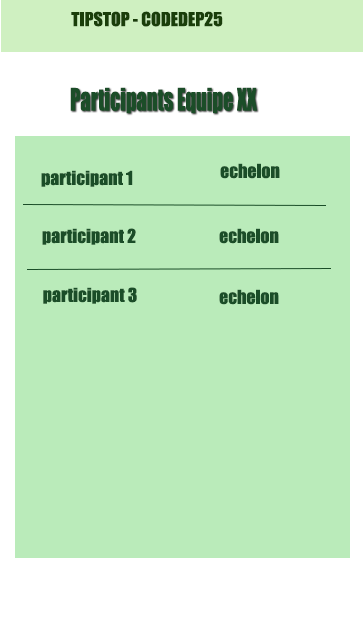
<style>
.page{position:relative;width:363px;height:643px;background:#baebba}
.page>*{position:absolute;margin:0}
.t1{font:17.8px "Impact";color:#1a3e0a}
.t2{font:28.6px "Impact";color:#1b4d28;scale:0.72 1}
.t3{font:17.8px "Impact";color:#1b4d28}
</style>
<div class="page">
<p class="t1" style="left:71px;top:11px;width:152px;height:16px">TIPSTOP - CODEDEP25</p>
<p class="t2" style="left:70px;top:87px;width:187px;height:27px">Participants Equipe XX</p>
<p class="t3" style="left:41px;top:170px;width:92px;height:17px">participant 1</p>
<p class="t3" style="left:220px;top:163px;width:60px;height:16px">echelon</p>
<p class="t3" style="left:42px;top:228px;width:94px;height:17px">participant 2</p>
<p class="t3" style="left:219px;top:228px;width:60px;height:16px">echelon</p>
<p class="t3" style="left:43px;top:287px;width:94px;height:17px">participant 3</p>
<p class="t3" style="left:219px;top:289px;width:60px;height:16px">echelon</p>
</div>
